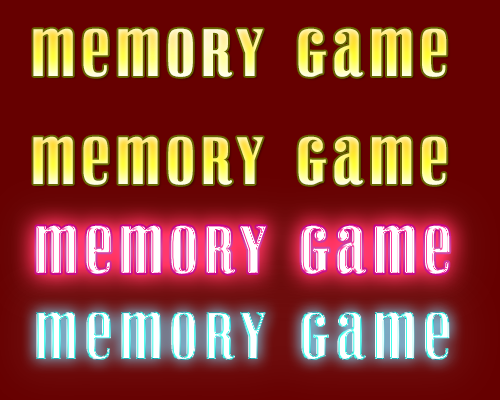
<style>
.page{position:relative;width:500px;height:400px;background:#660000}
.page>*{position:absolute;margin:0}
.t1{font:60px "VexlerSlip-Regular";letter-spacing:0.14em}
</style>
<div class="page">
<p class="t1" style="left:33px;top:28px;width:414px;height:49px">Memory Game</p>
<p class="t1" style="left:33px;top:136px;width:414px;height:49px">Memory Game</p>
<p class="t1" style="left:36px;top:225px;width:414px;height:49px">Memory Game</p>
<p class="t1" style="left:36px;top:311px;width:414px;height:49px">Memory Game</p>
</div>
